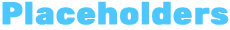
<style>
.page{position:relative;width:230px;height:30px;background:#ffffff}
.page>*{position:absolute;margin:0}
.t1{font:31.4px "Rubik-ExtraBold";letter-spacing:0.02em;color:#4ec7ff;font-weight:bold}
</style>
<div class="page">
<p class="t1" style="left:2px;top:1px;width:227px;height:24px">Placeholders</p>
</div>
